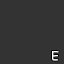
<style>
.page{position:relative;width:64px;height:64px;background:#333333}
.page>*{position:absolute;margin:0}
.t1{font:12.3px "ComicSansMS";color:#ffffff}
</style>
<div class="page">
<p class="t1" style="left:52px;top:51px;width:7px;height:10px">E</p>
</div>
